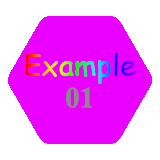
<style>
.page{position:relative;width:160px;height:160px;background:#ea00ff}
.page>*{position:absolute;margin:0}
.t1{font:29.2px "ComicSansMS"}
.t2{font:29.2px "TimesNewRomanPS-BoldMT";color:#8b8b8b}
</style>
<div class="page">
<p class="t1" style="left:25px;top:53px;width:111px;height:31px">Example</p>
<p class="t2" style="left:66px;top:87px;width:27px;height:21px">01</p>
</div>
